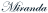
<style>
.page{position:relative;width:48px;height:13px;background:#ffffff}
.page>*{position:absolute;margin:0}
.t1{font:24px "EdwardianScrAltITCTTBold";color:#1b2d3a}
</style>
<div class="page">
<p class="t1" style="left:1px;top:1px;width:47px;height:11px">Miranda</p>
</div>
